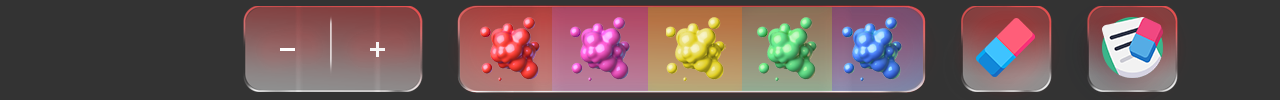
<style>
.page{position:relative;width:1280px;height:100px;background:#333333}
.page>*{position:absolute;margin:0}
.t1{font:27.2px "MyriadPro-Bold";color:#f6f6f6}
</style>
<div class="page">
<p class="t1" style="left:370px;top:42px;width:15px;height:15px">+</p>
</div>
